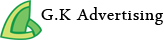
<style>
.page{position:relative;width:164px;height:40px;background:#ffffff}
.page>*{position:absolute;margin:0}
.t1{font:23.6px "ArabicTypesetting";letter-spacing:0.04em;color:#000000}
</style>
<div class="page">
<p class="t1" style="left:41px;top:7px;width:122px;height:18px">G.K Advertising</p>
</div>
